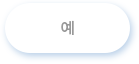
<style>
.page{position:relative;width:139px;height:64px;background:#ffffff}
.page>*{position:absolute;margin:0}
.t1{font:16px "NotoSansKR-Medium";letter-spacing:0.01em;color:#999999}
</style>
<div class="page">
<p class="t1" style="left:61px;top:20px;width:13px;height:15px">예</p>
</div>
